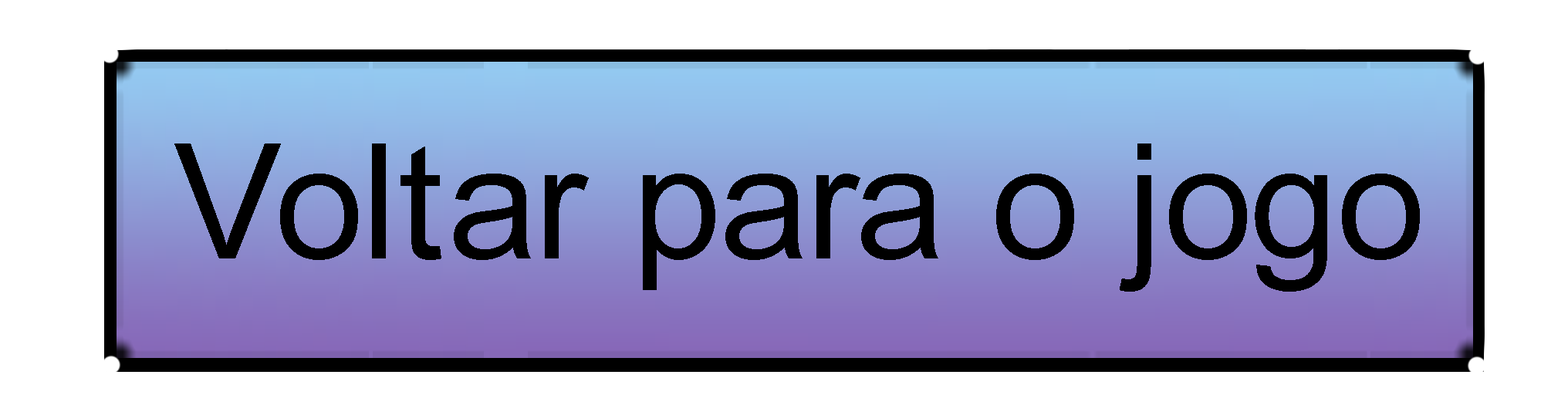
<style>
.page{position:relative;width:1568px;height:395px;background:#ffffff}
.page>*{position:absolute;margin:0}
.t1{font:160.5px "ArialMT";color:#000000}
</style>
<div class="page">
<p class="t1" style="left:174px;top:144px;width:1246px;height:148px">Voltar para o jogo</p>
</div>
